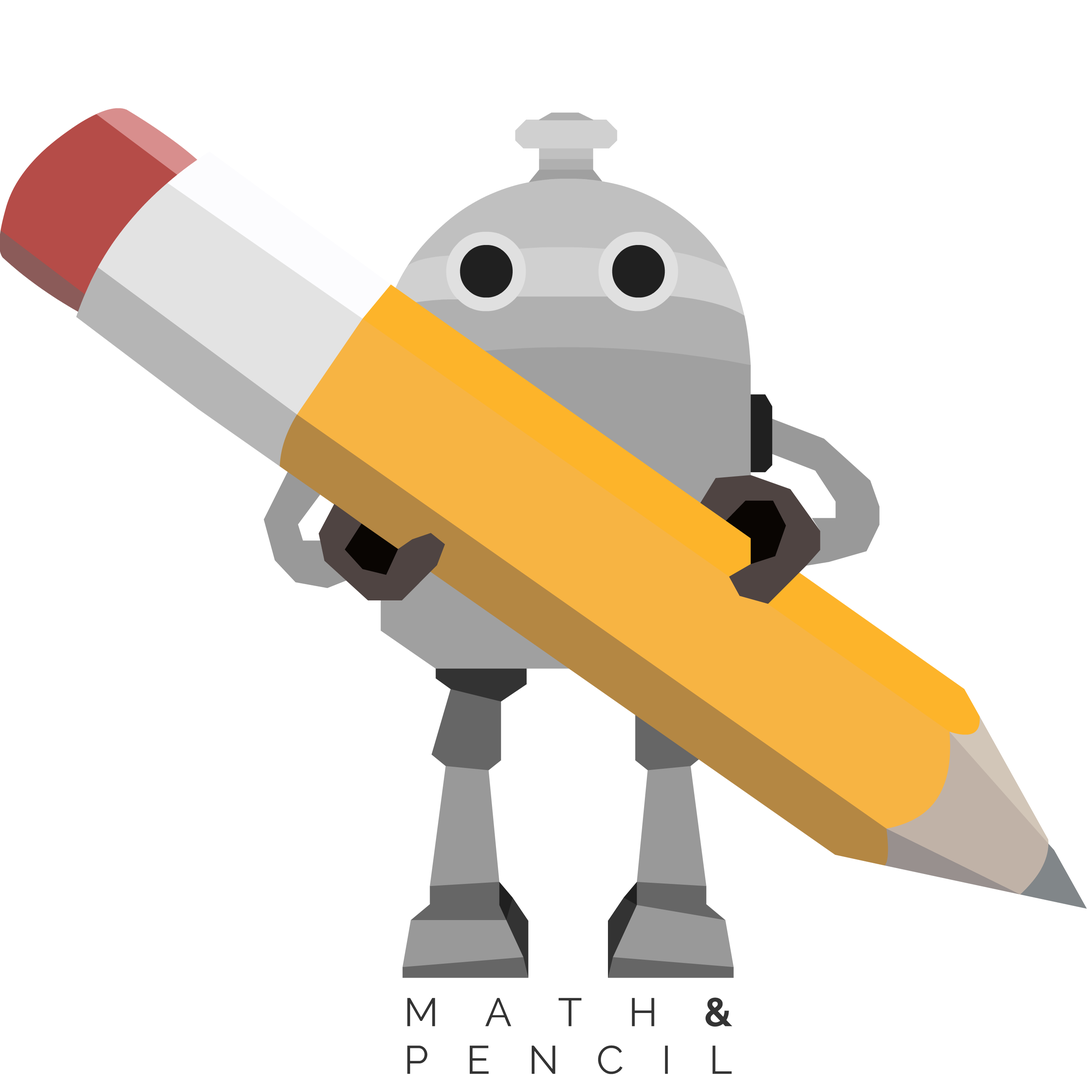
<style>
.page{position:relative;width:1092px;height:1092px;background:#ffffff}
.page>*{position:absolute;margin:0}
.t1{font:39.7px "Raleway-Regular";letter-spacing:0.4em;color:#333333}
.t2{font:39.7px "Raleway-Bold";letter-spacing:0.4em;color:#333333}
</style>
<div class="page">
<p class="t1" style="left:407px;top:997px;width:325px;height:77px;text-align:justify">MATH<span class="t2">&amp;</span> PENCIL</p>
</div>
